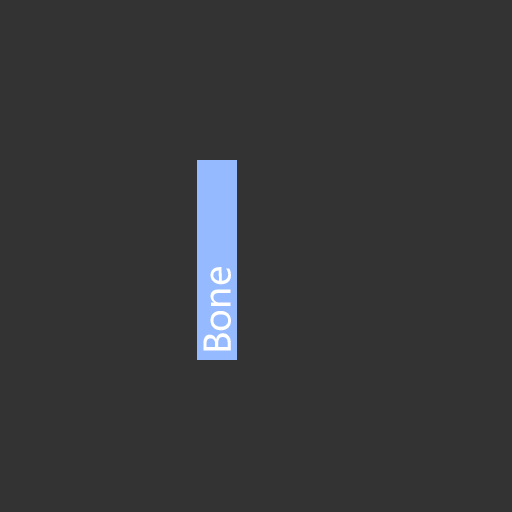
<style>
.page{position:relative;width:512px;height:512px;background:#333333}
.page>*{position:absolute;margin:0}
.t1{font:36px "MicrosoftYaHei";color:#ffffff}
</style>
<div class="page">
<p class="t1" style="left:203px;top:267px;width:28px;height:84px;rotate:-90deg">Bone</p>
</div>
